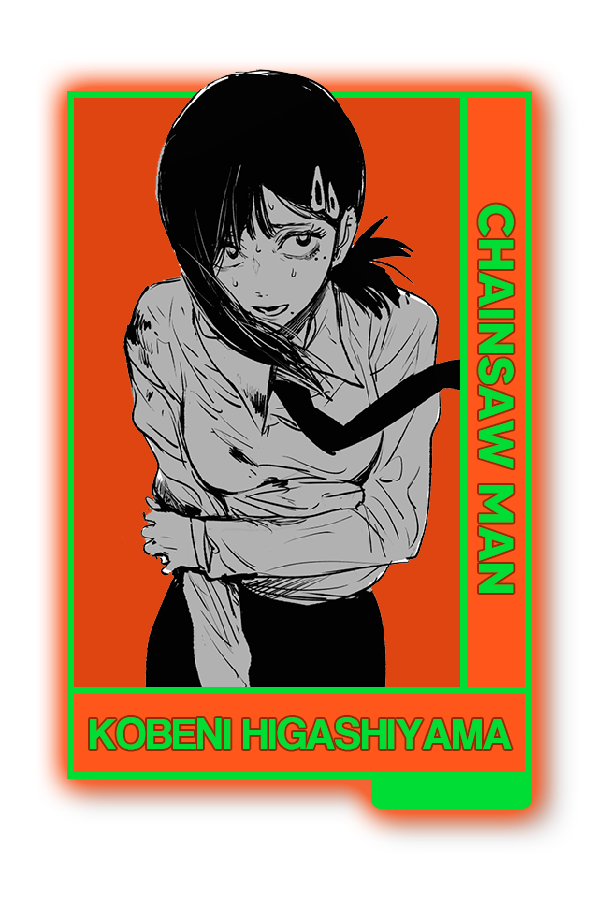
<style>
.page{position:relative;width:600px;height:900px;background:#ffffff}
.page>*{position:absolute;margin:0}
.t1{font:48.8px "MADETOMMY-Bold";color:#00dd35}
.t2{font:45px "CoolveticaRg-Regular";color:#00dd35}
</style>
<div class="page">
<p class="t1" style="left:478px;top:204px;width:36px;height:389px;rotate:90deg">CHAINSAW MAN</p>
<p class="t2" style="left:90px;top:717px;width:422px;height:33px">KOBENI HIGASHIYAMA</p>
</div>
